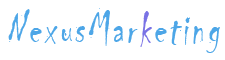
<style>
.page{position:relative;width:225px;height:60px;background:#ffffff}
.page>*{position:absolute;margin:0}
.t1{font:48.8px "Chiller-Regular";letter-spacing:0.075em;color:#4da6e7;font-style:italic;scale:0.78 1}
.t2{font:48.8px "Chiller-Regular";letter-spacing:0.075em;color:#7972e5;font-style:italic;scale:0.78 1}
</style>
<div class="page">
<p class="t1" style="left:8px;top:8px;width:212px;height:45px">NexusMar<span class="t2">k</span>eting</p>
</div>
